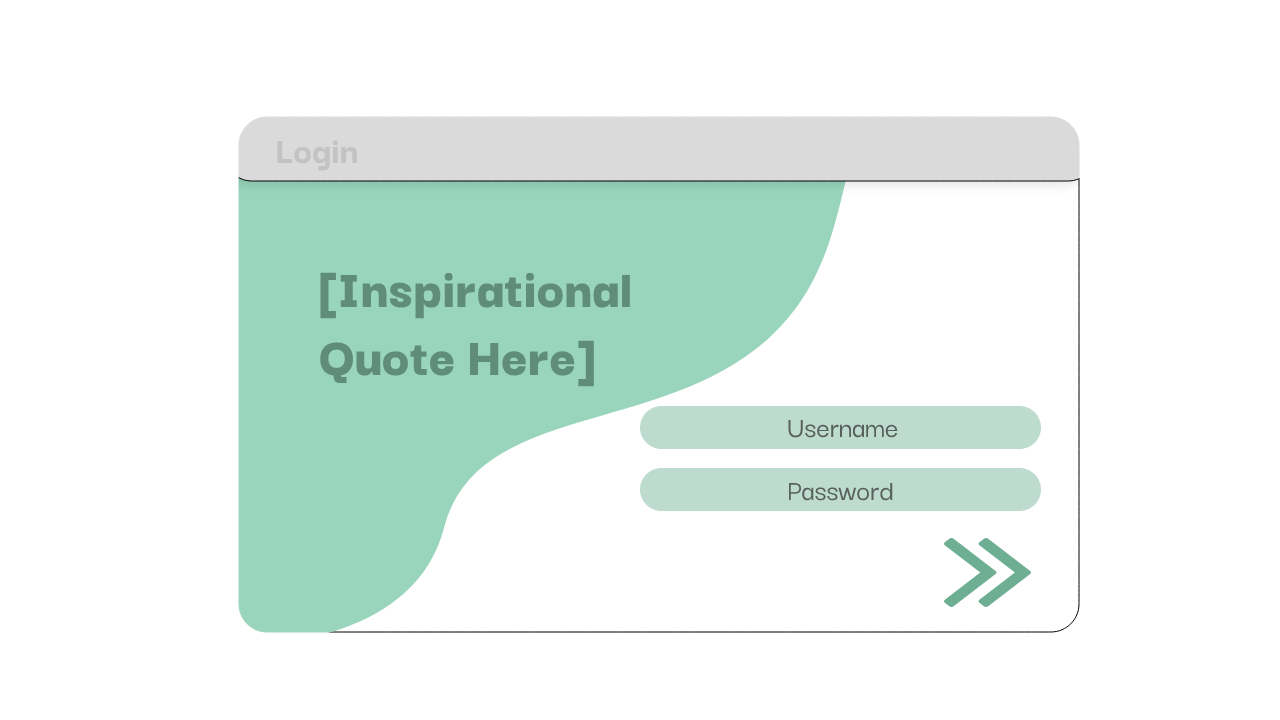
<style>
.page{position:relative;width:1280px;height:720px;background:#ffffff}
.page>*{position:absolute;margin:0}
.t1{font:39px "DarkerGrotesque-ExtraBold";color:#c3c3c3}
.t2{font:57px "DarkerGrotesque-Black";color:#608d7b}
.t3{font:30px "DarkerGrotesque-Medium";color:#57605c}
</style>
<div class="page">
<p class="t1" style="left:277px;top:140px;width:80px;height:31px">Login</p>
<p class="t2" style="left:320px;top:272px;width:310px;height:115px">[Inspirational<br>Quote Here]</p>
<p class="t3" style="left:788px;top:420px;width:110px;height:18px">Username</p>
<p class="t3" style="left:788px;top:483px;width:105px;height:18px">Password</p>
</div>
